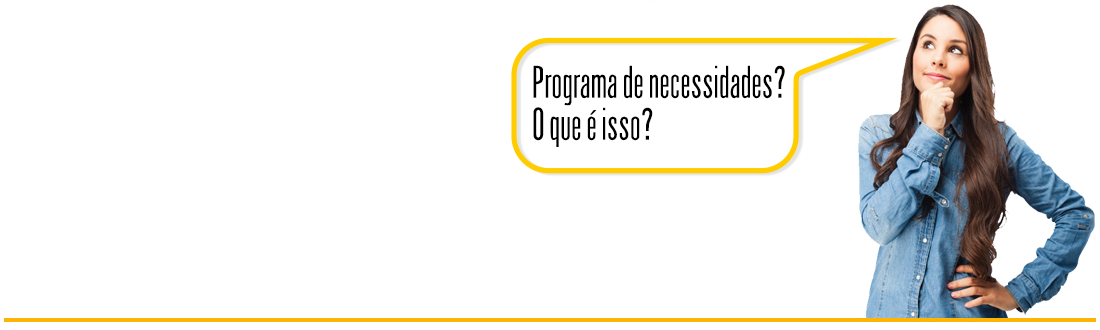
<style>
.page{position:relative;width:1100px;height:330px;background:#ffffff}
.page>*{position:absolute;margin:0}
.t1{font:40.6px/42px "Arizona";color:#000000}
</style>
<div class="page">
<p class="t1" style="left:533px;top:65px;width:252px;height:82px">Programa de necessidades?<br>O que é isso?</p>
</div>
